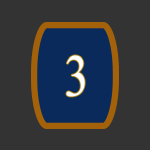
<style>
.page{position:relative;width:150px;height:150px;background:#333333}
.page>*{position:absolute;margin:0}
.t1{font:62.5px "TimesNewRomanPSMT";letter-spacing:0.1em;color:#ffffff;scale:0.75 1}
</style>
<div class="page">
<p class="t1" style="left:66px;top:55px;width:19px;height:42px">3</p>
</div>
